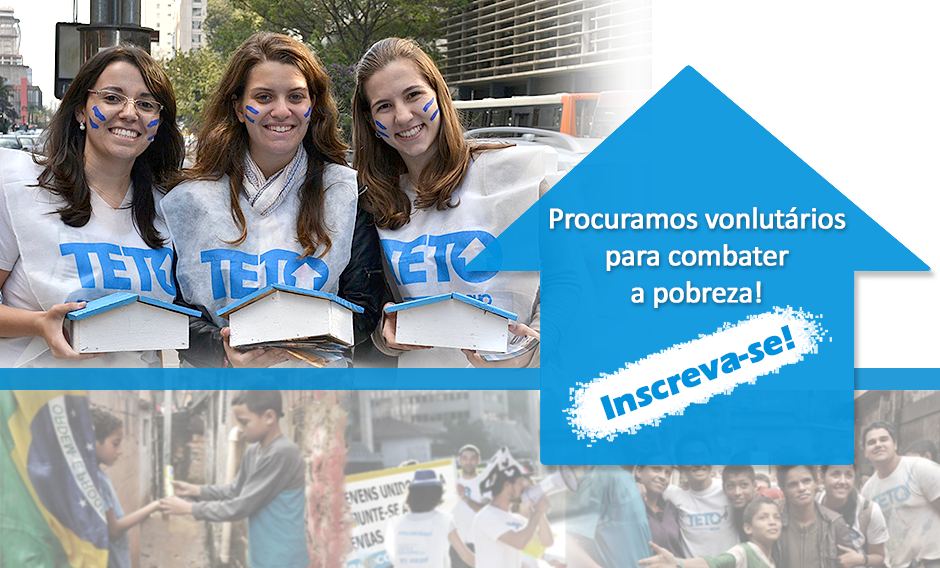
<style>
.page{position:relative;width:940px;height:568px}
.page>*{position:absolute;margin:0}
.t1{font:30.9px "Calibri";letter-spacing:-0.025em;color:#ffffff;font-weight:bold}
.t2{font:34.5px "ErasITC-Bold";letter-spacing:-0.025em;color:#0092dd;font-weight:bold}
</style>
<div class="page">
<p class="t1" style="left:550px;top:207px;width:296px;height:101px;text-align:center">Procuramos vonlutários<br>para combater <br>a pobreza!</p>
<p class="t2" style="left:600px;top:325px;width:196px;height:95px;rotate:-21deg">Inscreva-se!</p>
</div>
